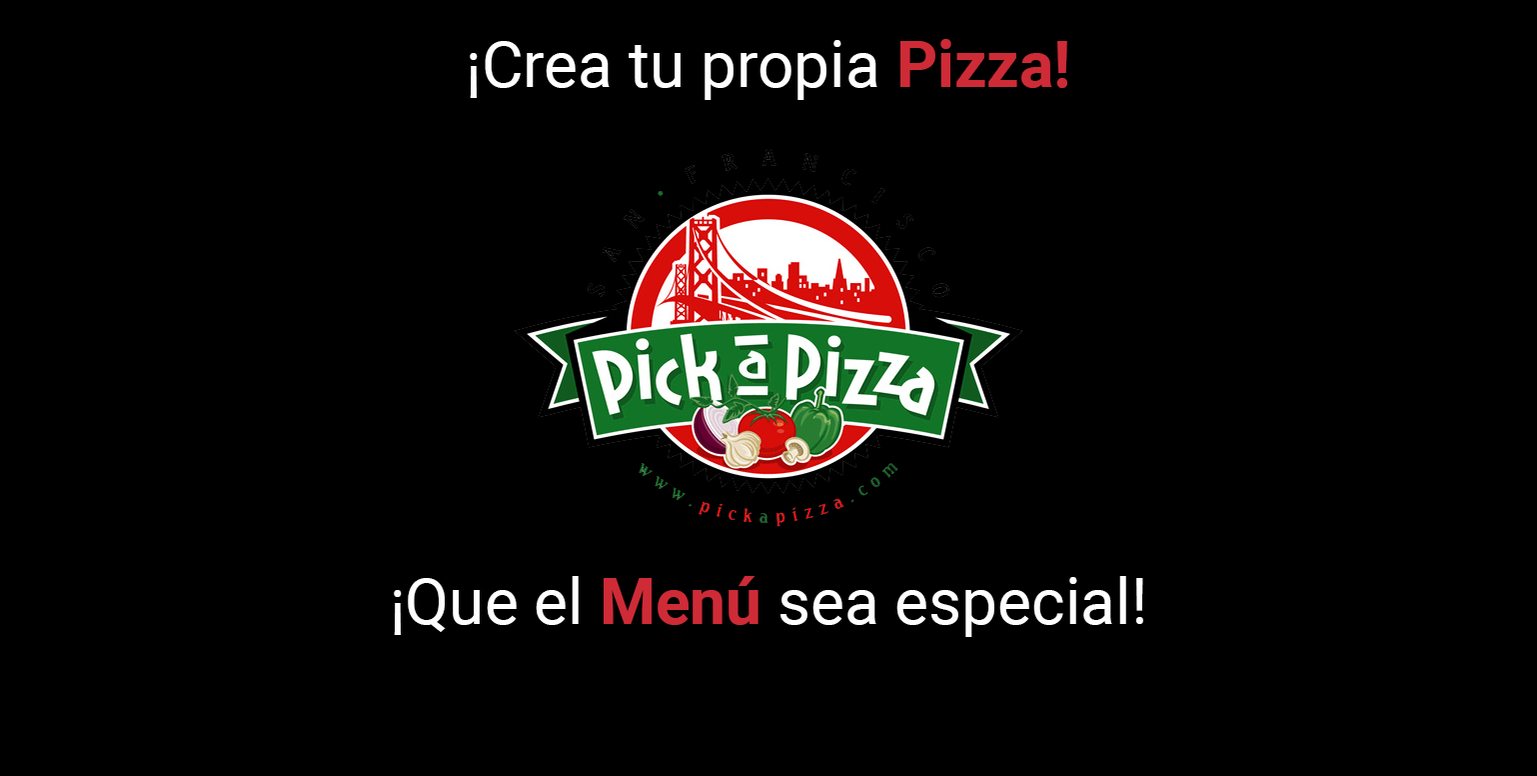
<style>
.page{position:relative;width:1537px;height:776px;background:#000000}
.page>*{position:absolute;margin:0}
.t1{font:64px "Roboto-Regular";color:#ffffff}
.t2{font:64px "Roboto-Bold";color:#ce2b37}
</style>
<div class="page">
<p class="t1" style="left:394px;top:39px;width:749px;height:598px;text-align:center">¡Crea tu propia <span class="t2">Pizza!<br><br><br><br><br><br><br></span>¡Que el <span class="t2">Menú </span>sea especial!</p>
</div>
